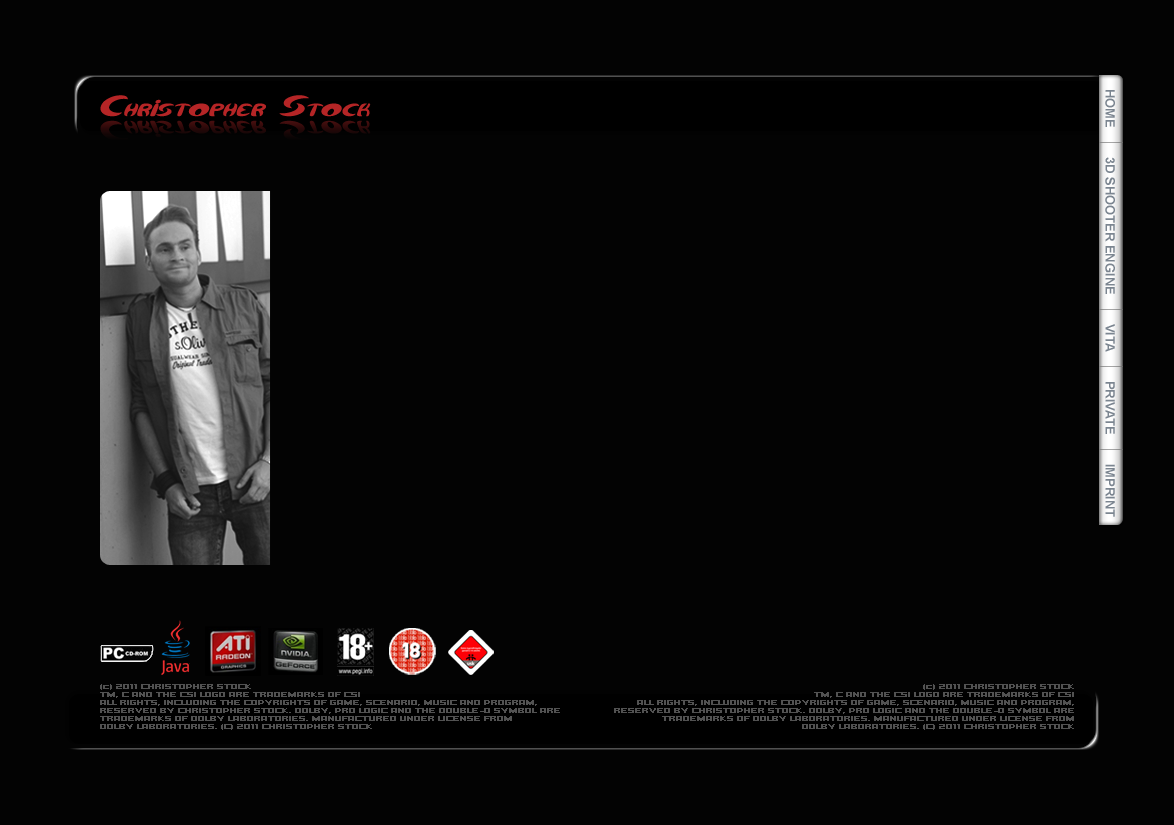
<style>
.page{position:relative;width:1174px;height:825px;background:#030303}
.page>*{position:absolute;margin:0}
.t1{font:30px "QurveWideItalic";color:#b52526;font-weight:bold}
.t2{font:13px "Arial-BoldMT";color:#7b8590}
.t3{font:30px "QurveWideItalic";color:#2d090a;font-weight:bold}
.t4{font:7px/8px "Quadrangle";color:#525252;font-weight:bold}
</style>
<div class="page">
<p class="t1" style="left:100px;top:95px;width:271px;height:22px">Christopher Stock</p>
<p class="t2" style="left:1105px;top:90px;width:10px;height:427px;rotate:90deg">HOME        3D SHOOTER ENGINE        VITA        PRIVATE        IMPRINT</p>
<p class="t3" style="left:100px;top:120px;width:271px;height:22px">Christopher Stock</p>
<p class="t4" style="left:100px;top:684px;width:460px;height:46px">(c) 2011 CHRISTOPHER STOCK<br>TM, C AND THE CSI LOGO ARE TRADEMARKS OF CSI<br>ALL RIGHTS, INCLUDING THE COPYRIGHTS OF GAME, SCENARIO, MUSIC AND PROGRAM,<br>RESERVED BY CHRISTOPHER STOCK. DOLBY, PRO LOGIC AND THE DOUBLE-D SYMBOL ARE<br>TRADEMARKS OF DOLBY LABORATORIES. MANUFACTURED UNDER LICENSE FROM<br>DOLBY LABORATORIES. (C) 2011 CHRISTOPHER STOCK</p>
<p class="t4" style="left:614px;top:684px;width:460px;height:46px;text-align:right">(c) 2011 CHRISTOPHER STOCK<br>TM, C AND THE CSI LOGO ARE TRADEMARKS OF CSI<br>ALL RIGHTS, INCLUDING THE COPYRIGHTS OF GAME, SCENARIO, MUSIC AND PROGRAM,<br>RESERVED BY CHRISTOPHER STOCK. DOLBY, PRO LOGIC AND THE DOUBLE-D SYMBOL ARE<br>TRADEMARKS OF DOLBY LABORATORIES. MANUFACTURED UNDER LICENSE FROM<br>DOLBY LABORATORIES. (C) 2011 CHRISTOPHER STOCK</p>
</div>
